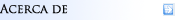
<style>
.page{position:relative;width:177px;height:20px}
.page>*{position:absolute;margin:0}
.t1{font:12px "TrajanPro-Regular";color:#050505}
</style>
<div class="page">
<p class="t1" style="left:0px;top:3px;width:68px;height:11px">Acerca de</p>
</div>
